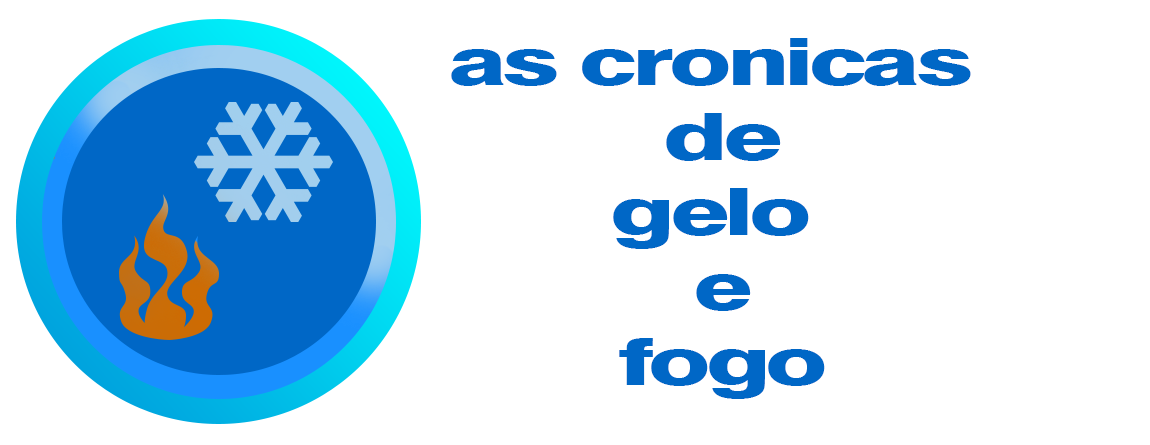
<style>
.page{position:relative;width:1150px;height:445px;background:#ffffff}
.page>*{position:absolute;margin:0}
.t1{font:65px/75px "Swiss721BT-Heavy";letter-spacing:-0.05em;color:#0067c6;scale:1.54 1}
</style>
<div class="page">
<p class="t1" style="left:451px;top:38px;width:520px;height:361px;text-align:center">as cronicas <br>de<br>gelo <br>e<br>fogo</p>
</div>
